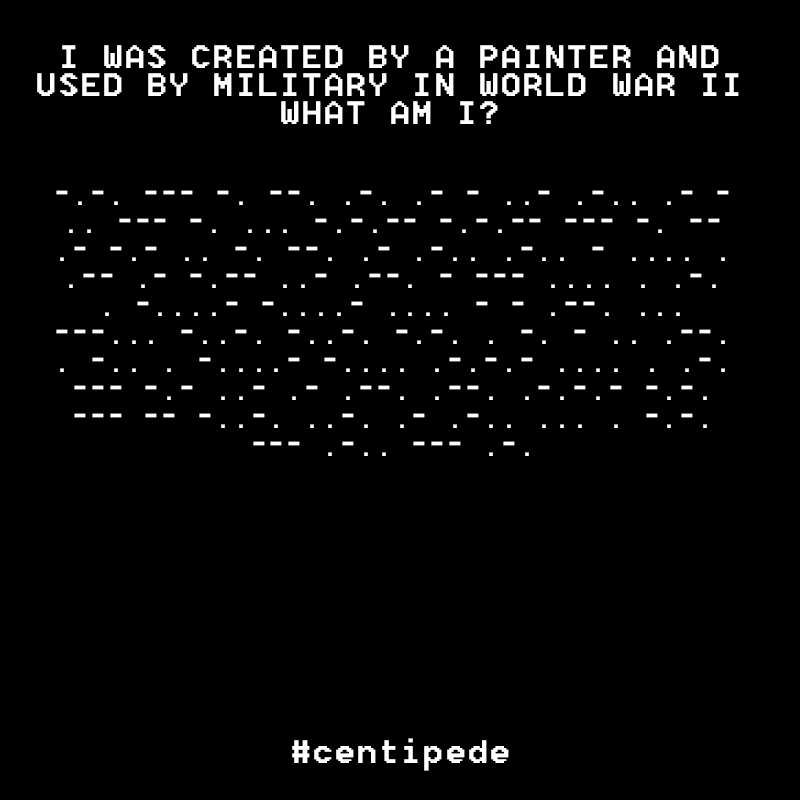
<style>
.page{position:relative;width:800px;height:800px;background:#000000}
.page>*{position:absolute;margin:0}
.t1{font:38.1px/28px "8514oem";color:#ffffff}
</style>
<div class="page">
<p class="t1" style="left:56px;top:190px;width:673px;height:266px;text-align:center">-.-. --- -. --. .-. .- - ..- .-.. .- - .. --- -. ... -.-.-- -.-.-- --- -. -- .- -.- .. -. --. .- .-.. .-.. - .... . .-- .- -.-- ..- .--. - --- .... . .-. . -....- -....- .... - - .--. ... ---... -..-. -..-. -.-. . -. - .. .--. . -.. . -....- -.... .-.-.- .... . .-. --- -.- ..- .- .--. .--. .-.-.- -.-. --- -- -..-. ..-. .- .-.. ... . -.-. --- .-.. --- .-.</p>
</div>
